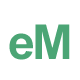
<style>
.page{position:relative;width:80px;height:80px;background:#ffffff}
.page>*{position:absolute;margin:0}
.t1{font:48px "Arial-BoldMT";letter-spacing:-0.05em;color:#4ba575}
</style>
<div class="page">
<p class="t1" style="left:9px;top:24px;width:61px;height:36px">eM</p>
</div>
